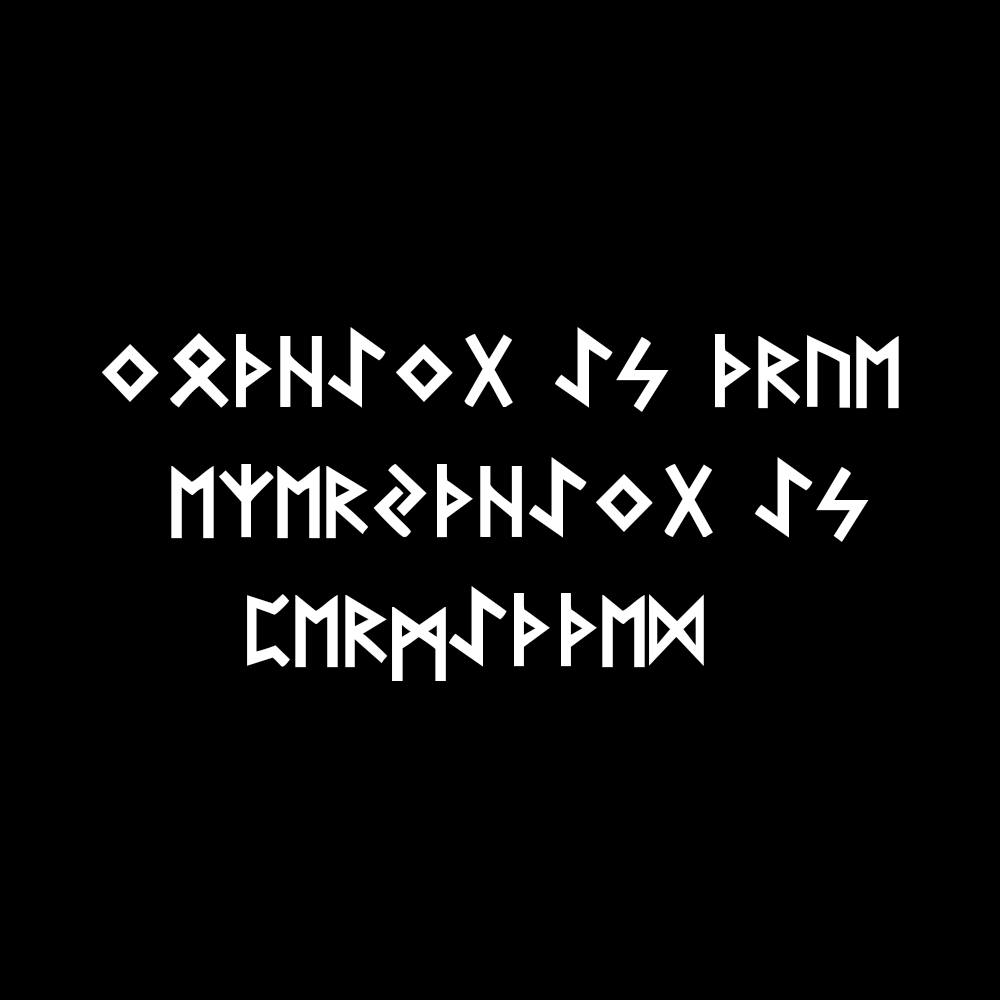
<style>
.page{position:relative;width:1000px;height:1000px;background:#000000}
.page>*{position:absolute;margin:0}
.t1{font:108px "Futhark-Gothic";color:#ffffff}
</style>
<div class="page">
<p class="t1" style="left:102px;top:327px;width:797px;height:354px">NOTHING IS TRUE<br>  EzERYTHING IS<br>    PERMITTED</p>
</div>
